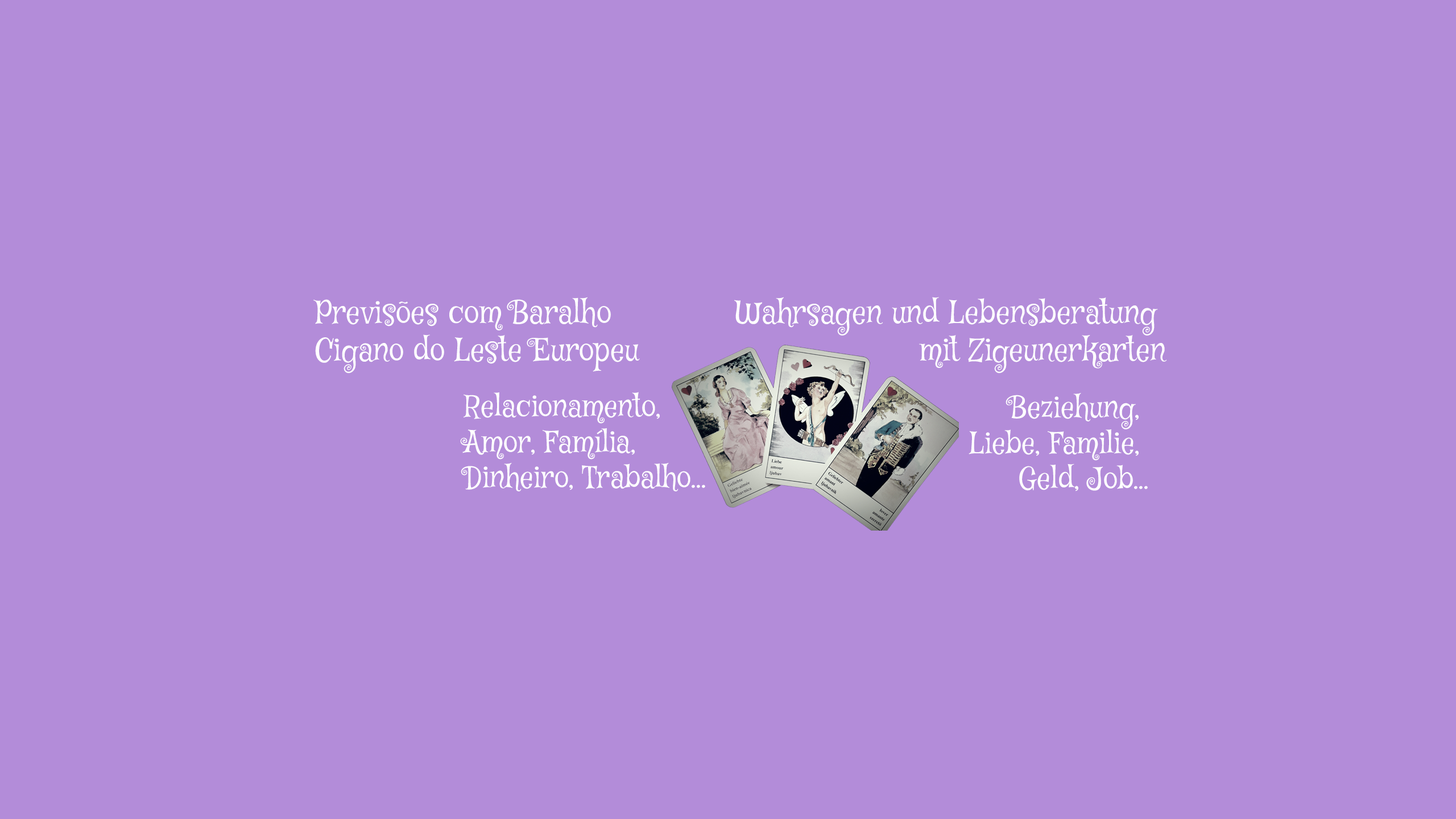
<style>
.page{position:relative;width:1456px;height:819px;background:#b38cd9}
.page>*{position:absolute;margin:0}
.t1{font:31.3px "MysteryQuest";color:#ffffff}
.t2{font:29.8px "MysteryQuest";color:#ffffff}
</style>
<div class="page">
<p class="t1" style="left:313px;top:297px;width:327px;height:76px">Previsões com Baralho <br>Cigano do Leste Europeu</p>
<p class="t1" style="left:734px;top:297px;width:433px;height:76px;text-align:right">Wahrsagen und Lebensberatung <br>mit Zigeunerkarten</p>
<p class="t2" style="left:460px;top:392px;width:245px;height:99px">Relacionamento, <br>Amor, Família, <br>Dinheiro, Trabalho...</p>
<p class="t2" style="left:969px;top:392px;width:179px;height:99px;text-align:right">Beziehung, <br>Liebe, Familie, <br>Geld, Job...</p>
</div>
